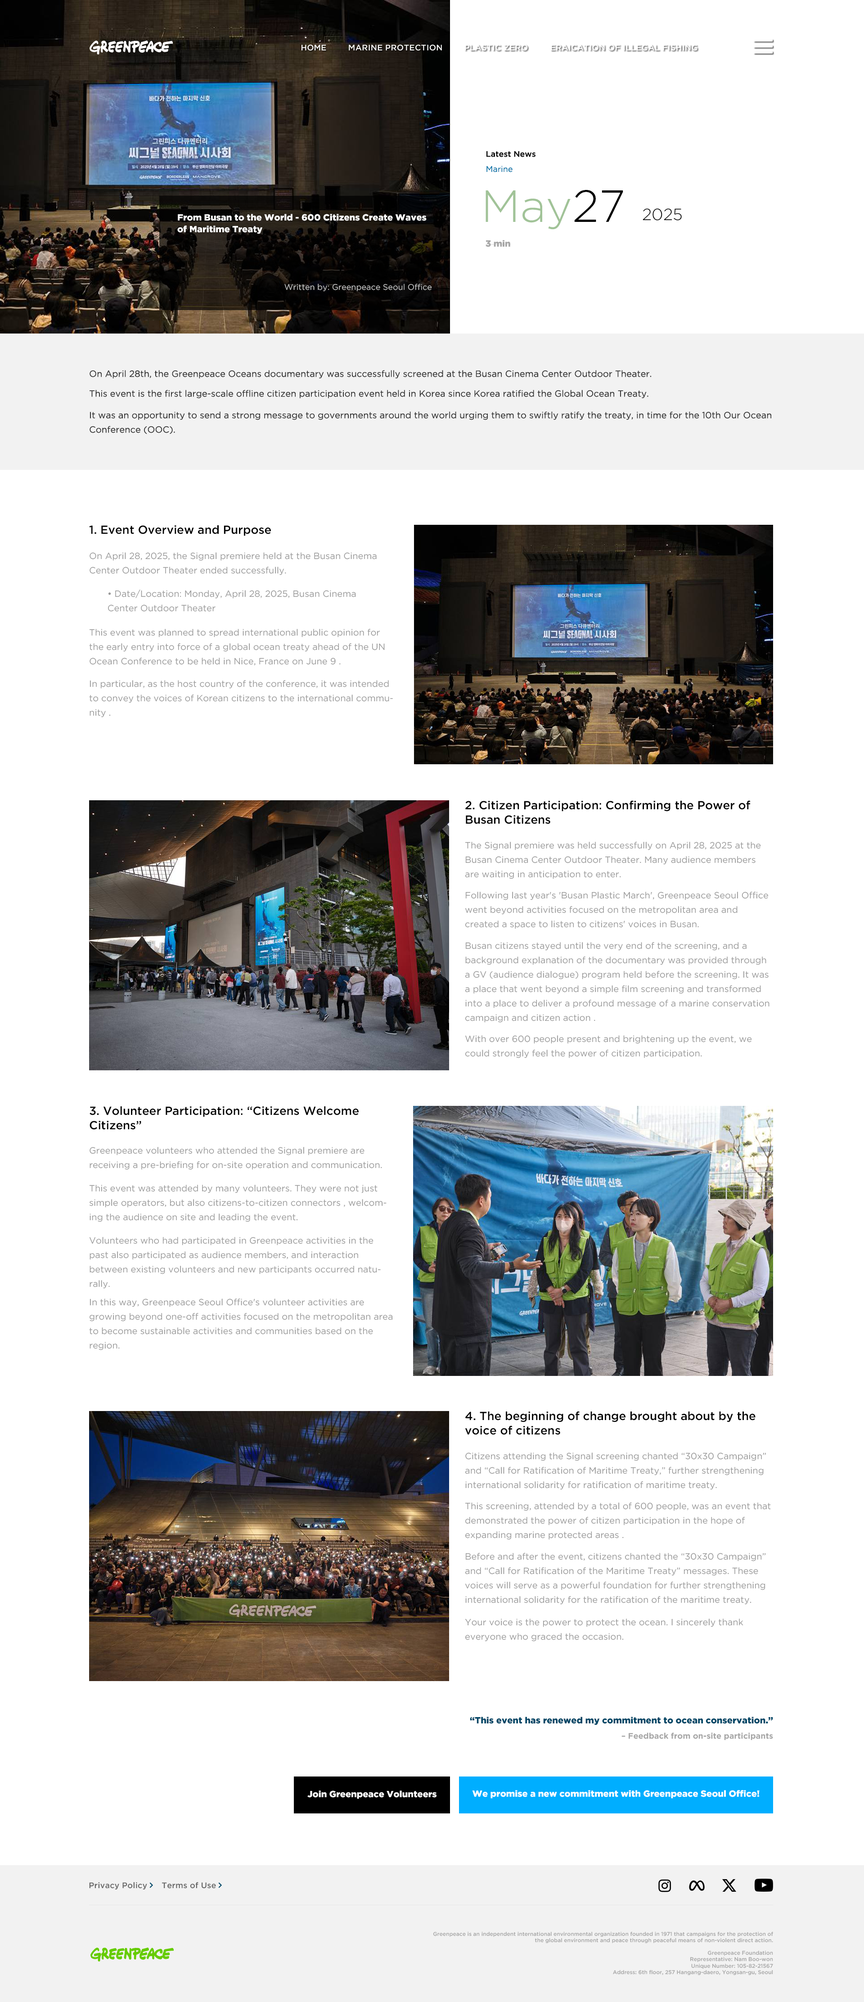
<style>
.page{position:relative;width:864px;height:2002px;background:#ffffff}
.page>*{position:absolute;margin:0}
.t1{font:8.1px "GothamPro-Medium";color:#ffffff}
.t2{font:8.1px "GothamPro-Medium";color:#ffffff;text-transform:uppercase}
.t3{font:8.1px "GothamPro-Medium";color:#000000}
.t4{font:8.1px "GothamPro";color:#0071a6}
.t5{font:45px "GothamPro-Light";color:#a1c398}
.t6{font:45px "GothamPro-Light";color:#000000}
.t7{font:16.2px "GothamPro-Light";color:#000000}
.t8{font:9px/11.7px "GothamPro-Black";color:#ffffff}
.t9{font:9px "GothamPro-Black";color:#a6a6a6}
.t10{font:8.1px "GothamPro";color:#c4c4c4}
.t11{font:9px "GothamPro";color:#333333}
.t12{font:9px/14.4px "GothamPro";color:#333333}
.t13{font:11.7px "GothamPro-Medium";color:#000000}
.t14{font:9px/14.4px "GothamPro";color:#999999}
.t15{font:11.7px/14.4px "GothamPro-Medium";color:#000000}
.t16{font:9px "GothamPro-Black";color:#004666}
.t17{font:8.1px "GothamPro-Bold";color:#a6a6a6}
.t18{font:9px "GothamPro-Black";color:#ffffff}
.t19{font:8.1px "GothamPro-Medium";letter-spacing:0.01em;color:#666666}
.t20{font:5.4px "GothamPro-Medium";color:#a6a6a6}
</style>
<div class="page">
<p class="t1" style="left:302px;top:45px;width:24px;height:6px">HOME</p>
<p class="t2" style="left:349px;top:45px;width:93px;height:6px">Marine protection</p>
<p class="t2" style="left:465px;top:45px;width:63px;height:6px">Plastic Zero</p>
<p class="t2" style="left:551px;top:45px;width:147px;height:6px">Eraication of illegal fishing</p>
<p class="t3" style="left:486px;top:151px;width:50px;height:6px">Latest News</p>
<p class="t4" style="left:486px;top:166px;width:27px;height:6px">Marine</p>
<p class="t5" style="left:486px;top:190px;width:137px;height:40px">May<span class="t6">27</span></p>
<p class="t7" style="left:643px;top:208px;width:39px;height:12px">2025</p>
<p class="t8" style="left:177px;top:214px;width:250px;height:20px">From Busan to the World - 600 Citizens Create Waves of Maritime Treaty</p>
<p class="t9" style="left:485px;top:240px;width:26px;height:7px">3 min</p>
<p class="t10" style="left:284px;top:284px;width:148px;height:8px">Written by: Greenpeace Seoul Office</p>
<p class="t11" style="left:90px;top:370px;width:561px;height:8px">On April 28th, the Greenpeace Oceans documentary was successfully screened at the Busan Cinema Center Outdoor Theater.</p>
<p class="t11" style="left:90px;top:390px;width:558px;height:8px">This event is the first large-scale offline citizen participation event held in Korea since Korea ratified the Global Ocean Treaty.</p>
<p class="t12" style="left:90px;top:411px;width:681px;height:23px">It was an opportunity to send a strong message to governments around the world urging them to swiftly ratify the treaty, in time for the 10th Our Ocean Conference (OOC).</p>
<p class="t13" style="left:89px;top:525px;width:182px;height:11px">1. Event Overview and Purpose</p>
<p class="t14" style="left:90px;top:552px;width:287px;height:23px">On April 28, 2025, the Signal premiere held at the Busan Cinema Center Outdoor Theater ended successfully.</p>
<p class="t14" style="left:108px;top:590px;width:248px;height:22px">• Date/Location: Monday, April 28, 2025, Busan Cinema Center Outdoor Theater</p>
<p class="t14" style="left:89px;top:629px;width:296px;height:37px">This event was planned to spread international public opinion for the early entry into force of a global ocean treaty ahead of the UN Ocean Conference to be held in Nice, France on June 9 .</p>
<p class="t14" style="left:89px;top:680px;width:304px;height:37px">In particular, as the host country of the conference, it was intended to convey the voices of Korean citizens to the international community .</p>
<p class="t15" style="left:465px;top:800px;width:285px;height:24px">2. Citizen Participation: Confirming the Power of Busan Citizens</p>
<p class="t14" style="left:465px;top:842px;width:296px;height:37px">The Signal premiere was held successfully on April 28, 2025 at the Busan Cinema Center Outdoor Theater. Many audience members are waiting in anticipation to enter.</p>
<p class="t14" style="left:465px;top:891px;width:303px;height:38px">Following last year's 'Busan Plastic March', Greenpeace Seoul Office went beyond activities focused on the metropolitan area and created a space to listen to citizens' voices in Busan.</p>
<p class="t14" style="left:465px;top:942px;width:305px;height:80px">Busan citizens stayed until the very end of the screening, and a background explanation of the documentary was provided through a GV (audience dialogue) program held before the screening. It was a place that went beyond a simple film screening and transformed into a place to deliver a profound message of a marine conservation campaign and citizen action .</p>
<p class="t14" style="left:465px;top:1035px;width:287px;height:23px">With over 600 people present and brightening up the event, we could strongly feel the power of citizen participation.</p>
<p class="t15" style="left:90px;top:1106px;width:269px;height:24px">3. Volunteer Participation: “Citizens Welcome Citizens”</p>
<p class="t14" style="left:90px;top:1147px;width:292px;height:23px">Greenpeace volunteers who attended the Signal premiere are receiving a pre-briefing for on-site operation and communication.</p>
<p class="t14" style="left:89px;top:1184px;width:298px;height:38px">This event was attended by many volunteers. They were not just simple operators, but also citizens-to-citizen connectors , welcoming the audience on site and leading the event.</p>
<p class="t14" style="left:89px;top:1237px;width:292px;height:51px">Volunteers who had participated in Greenpeace activities in the past also participated as audience members, and interaction between existing volunteers and new participants occurred naturally.</p>
<p class="t14" style="left:89px;top:1298px;width:304px;height:52px">In this way, Greenpeace Seoul Office's volunteer activities are growing beyond one-off activities focused on the metropolitan area to become sustainable activities and communities based on the region.</p>
<p class="t15" style="left:465px;top:1411px;width:291px;height:24px">4. The beginning of change brought about by the voice of citizens</p>
<p class="t14" style="left:465px;top:1452px;width:301px;height:38px">Citizens attending the Signal screening chanted “30x30 Campaign” and “Call for Ratification of Maritime Treaty,” further strengthening international solidarity for ratification of maritime treaty.</p>
<p class="t14" style="left:465px;top:1502px;width:306px;height:37px">This screening, attended by a total of 600 people, was an event that demonstrated the power of citizen participation in the hope of expanding marine protected areas .</p>
<p class="t14" style="left:465px;top:1552px;width:301px;height:52px">Before and after the event, citizens chanted the “30x30 Campaign” and “Call for Ratification of the Maritime Treaty” messages. These voices will serve as a powerful foundation for further strengthening international solidarity for the ratification of the maritime treaty.</p>
<p class="t14" style="left:465px;top:1618px;width:278px;height:23px">Your voice is the power to protect the ocean. I sincerely thank everyone who graced the occasion.</p>
<p class="t16" style="left:470px;top:1716px;width:303px;height:9px">“This event has renewed my commitment to ocean conservation.”</p>
<p class="t17" style="left:621px;top:1732px;width:152px;height:8px">– Feedback from on-site participants</p>
<p class="t18" style="left:307px;top:1790px;width:129px;height:9px">Join Greenpeace Volunteers</p>
<p class="t18" style="left:472px;top:1790px;width:288px;height:8px">We promise a new commitment with Greenpeace Seoul Office!</p>
<p class="t19" style="left:89px;top:1881px;width:58px;height:8px">Privacy Policy</p>
<p class="t19" style="left:162px;top:1881px;width:54px;height:7px">Terms of Use</p>
<p class="t20" style="left:433px;top:1931px;width:340px;height:12px;text-align:right">Greenpeace is an independent international environmental organization founded in 1971 that campaigns for the protection of the global environment and peace through peaceful means of non-violent direct action.</p>
<p class="t20" style="left:613px;top:1950px;width:160px;height:25px;text-align:right">Greenpeace Foundation<br>Representative: Nam Boo-won<br>Unique Number: 105-82-21567<br>Address: 6th floor, 257 Hangang-daero, Yongsan-gu, Seoul</p>
</div>
